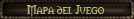
<style>
.page{position:relative;width:134px;height:19px}
.page>*{position:absolute;margin:0}
.t1{font:12px "Morpheus";color:#b8b27c}
</style>
<div class="page">
<p class="t1" style="left:26px;top:5px;width:79px;height:12px">Mapa del Juego</p>
</div>
